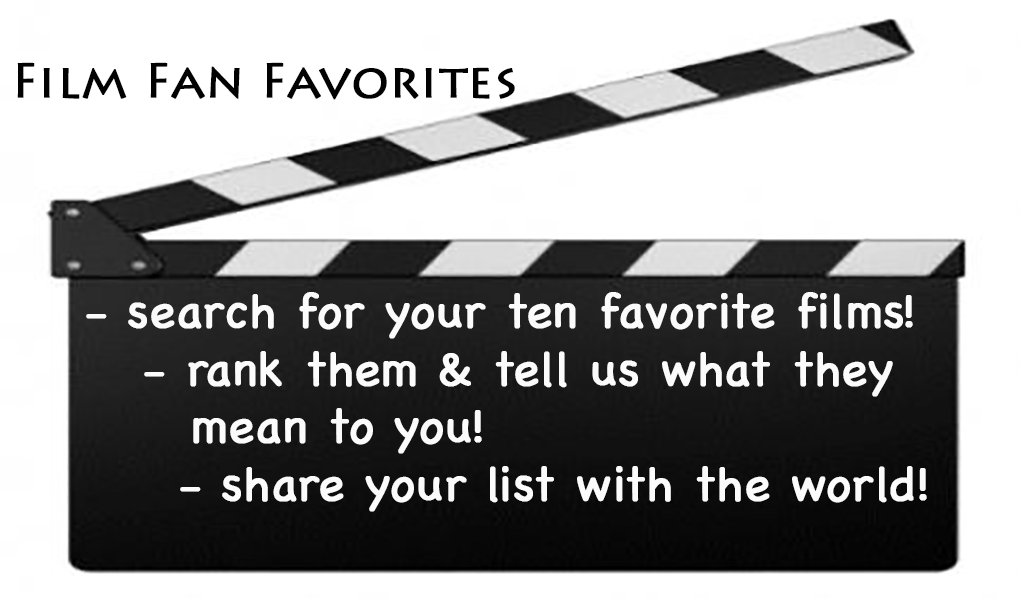
<style>
.page{position:relative;width:1020px;height:599px;background:#ffffff}
.page>*{position:absolute;margin:0}
.t1{font:48px "Chalkboard";color:#fcfbfb;font-weight:bold}
</style>
<div class="page">
<p class="t1" style="left:86px;top:292px;width:841px;height:220px;text-align:center">- search for your ten favorite films!<br>                       - rank them &amp; tell us what they<br>             mean to you!<br>                         - share your list with the world!</p>
</div>
